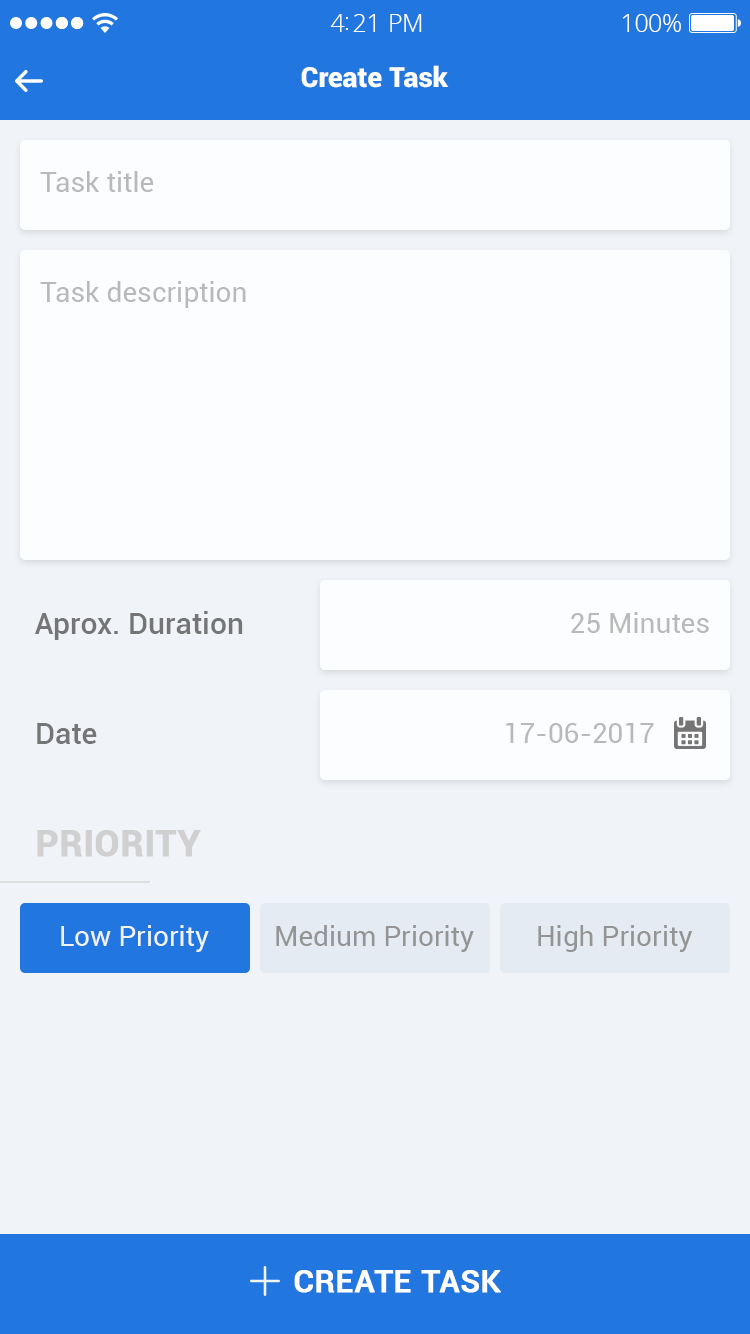
<style>
.page{position:relative;width:750px;height:1334px;background:#f0f4f8}
.page>*{position:absolute;margin:0}
.t1{font:25px "OpenSans-Light";letter-spacing:-0.02em;color:#ffffff}
.t2{font:28px "Roboto-Black";color:#ffffff}
.t3{font:28px "Roboto-Regular";color:#b9b9b9}
.t4{font:30px "Roboto-Medium";color:#757575}
.t5{font:36px "Roboto-Bold";color:#d0d0d0;text-transform:uppercase;font-weight:bold}
.t6{font:28px "Roboto-Regular";color:#f0f4f8}
.t7{font:28px "Roboto-Regular";color:#949494}
.t8{font:32px "Roboto-Medium";color:#ffffff;text-transform:uppercase;font-weight:bold}
</style>
<div class="page">
<p class="t1" style="left:330px;top:14px;width:92px;height:18px">4:21 PM</p>
<p class="t1" style="left:622px;top:14px;width:59px;height:18px">100%</p>
<p class="t2" style="left:301px;top:65px;width:148px;height:23px">Create Task</p>
<p class="t3" style="left:40px;top:171px;width:114px;height:21px">Task title</p>
<p class="t3" style="left:40px;top:281px;width:206px;height:27px">Task description</p>
<p class="t4" style="left:35px;top:611px;width:208px;height:29px">Aprox. Duration</p>
<p class="t3" style="left:571px;top:612px;width:138px;height:21px">25 Minutes</p>
<p class="t4" style="left:37px;top:723px;width:60px;height:21px">Date</p>
<p class="t3" style="left:506px;top:722px;width:148px;height:21px">17-06-2017</p>
<p class="t5" style="left:37px;top:830px;width:164px;height:27px">Priority</p>
<p class="t6" style="left:61px;top:925px;width:148px;height:27px">Low Priority</p>
<p class="t7" style="left:276px;top:925px;width:198px;height:27px">Medium Priority</p>
<p class="t7" style="left:538px;top:925px;width:155px;height:27px">High Priority</p>
<p class="t8" style="left:294px;top:1270px;width:207px;height:23px">Create task</p>
</div>
